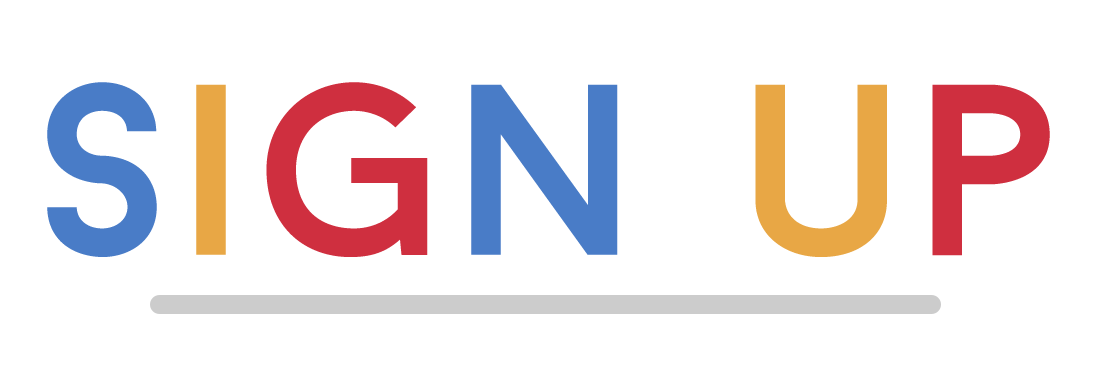
<style>
.page{position:relative;width:1100px;height:373px;background:#ffffff}
.page>*{position:absolute;margin:0}
.t1{font:242.5px "BaronNeue";letter-spacing:0.025em;color:#497cc7;scale:1.03 1}
.t2{font:242.5px "BaronNeue";letter-spacing:0.025em;color:#e8a745;scale:1.03 1}
.t3{font:242.5px "BaronNeue";letter-spacing:0.025em;color:#cf2f3f;scale:1.03 1}
</style>
<div class="page">
<p class="t1" style="left:47px;top:82px;width:1003px;height:175px">s<span class="t2">i</span><span class="t3">g</span>n <span class="t2">u</span><span class="t3">p</span></p>
</div>
